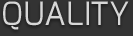
<style>
.page{position:relative;width:133px;height:36px;background:#333333}
.page>*{position:absolute;margin:0}
.t1{font:32px "Exo-Regular";color:#d7d7d7;text-transform:uppercase}
</style>
<div class="page">
<p class="t1" style="left:3px;top:1px;width:126px;height:29px">Quality</p>
</div>
